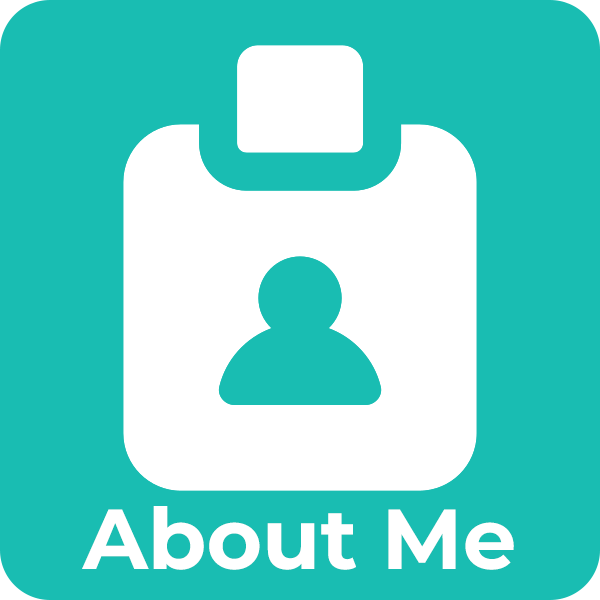
<style>
.page{position:relative;width:600px;height:600px;background:#19bdb2}
.page>*{position:absolute;margin:0}
.t1{font:85px "Montserrat-Bold";color:#ffffff}
</style>
<div class="page">
<p class="t1" style="left:82px;top:506px;width:432px;height:64px">About Me</p>
</div>
